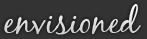
<style>
.page{position:relative;width:147px;height:39px;background:#333333}
.page>*{position:absolute;margin:0}
.t1{font:36px "BlackJackRegular";color:#dadada}
</style>
<div class="page">
<p class="t1" style="left:4px;top:4px;width:137px;height:31px">envisioned</p>
</div>
